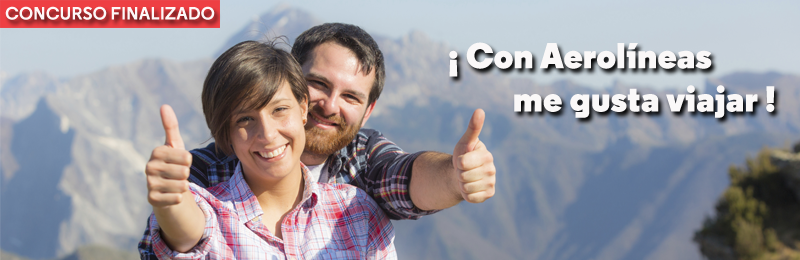
<style>
.page{position:relative;width:800px;height:260px}
.page>*{position:absolute;margin:0}
.t1{font:18px "Regular-Bold";color:#fdf8f8}
.t2{font:36px "Regular-Black";color:#faf8f8}
</style>
<div class="page">
<p class="t1" style="left:5px;top:6px;width:210px;height:14px">CONCURSO FINALIZADO</p>
<p class="t2" style="left:449px;top:42px;width:326px;height:76px">¡ Con Aerolíneas <br>         me gusta viajar !</p>
</div>
